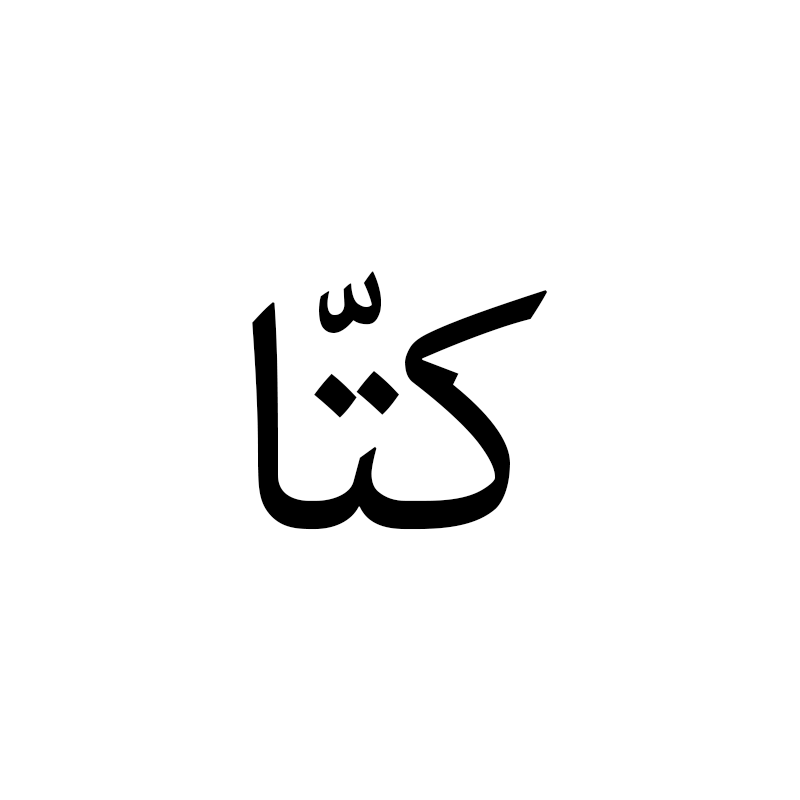
<style>
.page{position:relative;width:800px;height:800px;background:#ffffff}
.page>*{position:absolute;margin:0}
.t1{font:450px "AdobeArabic-Regular";color:#000000}
</style>
<div class="page">
<p class="t1" style="left:252px;top:271px;width:296px;height:259px">کتّا</p>
</div>
